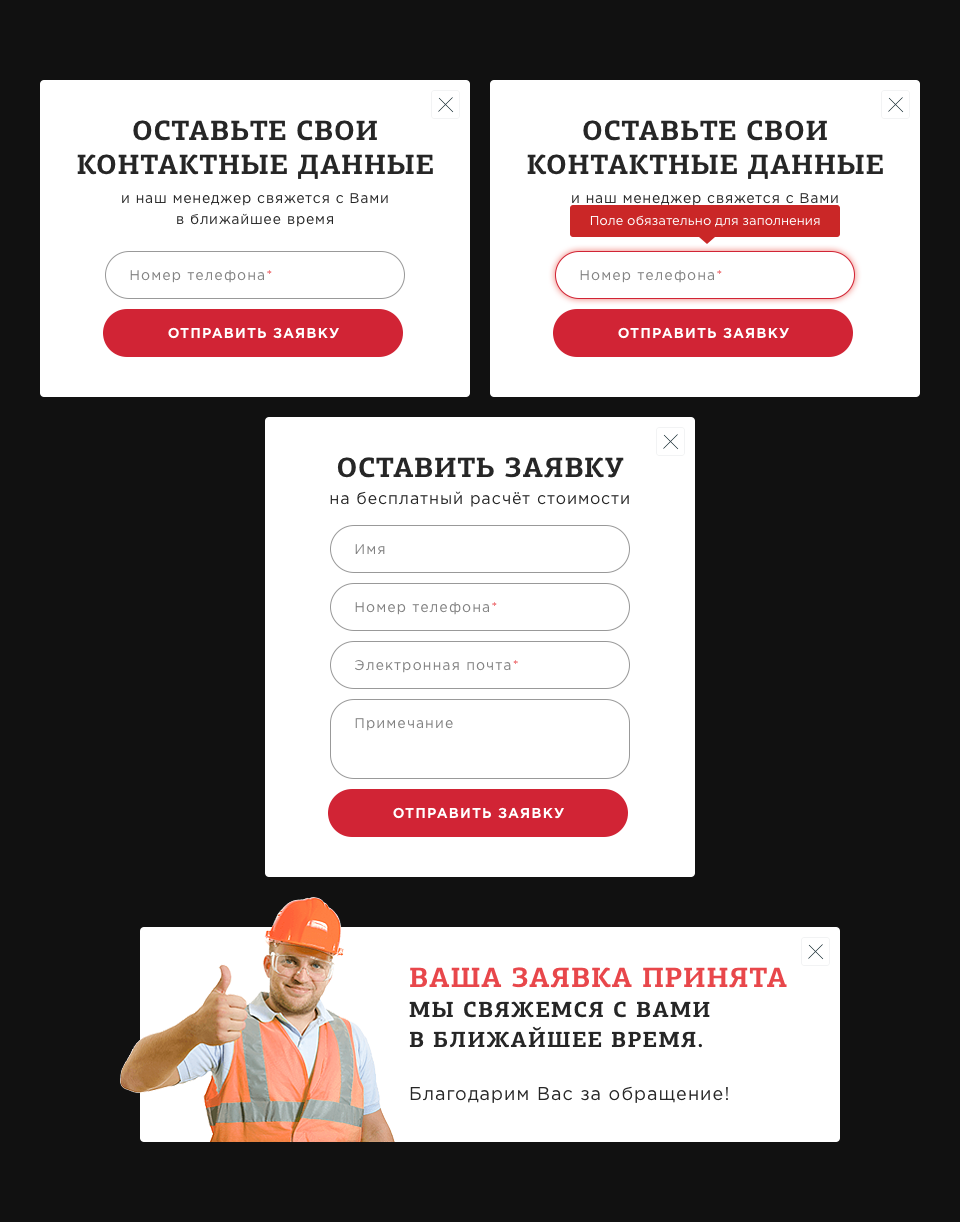
<style>
.page{position:relative;width:960px;height:1222px;background:#111111}
.page>*{position:absolute;margin:0}
.t1{font:28px/34px "PFAgoraSlabPro-Bold";letter-spacing:0.025em;color:#262626;text-transform:uppercase}
.t2{font:14px/21px "GothamPro";letter-spacing:0.06em;color:#262626}
.t3{font:13px "GothamPro";color:#ffffff}
.t4{font:14px "GothamPro";letter-spacing:0.08em;color:#818181}
.t5{font:14px "GothamPro";letter-spacing:0.08em;color:#e8474b}
.t6{font:14px "GothamPro-Bold";letter-spacing:0.08em;color:#ffffff;text-transform:uppercase}
.t7{font:28px "PFAgoraSlabPro-Bold";letter-spacing:0.025em;color:#262626;text-transform:uppercase}
.t8{font:16px "GothamPro";letter-spacing:0.06em;color:#262626}
.t9{font:22px/30px "PFAgoraSlabPro-Bold";letter-spacing:0.06em;color:#262626;text-transform:uppercase}
.t10{font:28px/30px "PFAgoraSlabPro-Bold";letter-spacing:0.025em;color:#e8474b;text-transform:uppercase}
.t11{font:18px "GothamPro";letter-spacing:0.06em;color:#262626}
</style>
<div class="page">
<p class="t1" style="left:77px;top:120px;width:356px;height:59px;text-align:center">Оставьте свои<br>контактные данные</p>
<p class="t1" style="left:527px;top:120px;width:356px;height:59px;text-align:center">Оставьте свои<br>контактные данные</p>
<p class="t2" style="left:122px;top:193px;width:266px;height:34px;text-align:center">и наш менеджер свяжется с Вами<br>в ближайшее время</p>
<p class="t2" style="left:572px;top:193px;width:266px;height:34px;text-align:center">и наш менеджер свяжется с Вами<br>в ближайшее время</p>
<p class="t3" style="left:590px;top:215px;width:230px;height:12px">Поле обязательно для заполнения</p>
<p class="t4" style="left:130px;top:270px;width:142px;height:13px">Номер телефона<span class="t5">*</span></p>
<p class="t4" style="left:580px;top:270px;width:142px;height:13px">Номер телефона<span class="t5">*</span></p>
<p class="t6" style="left:168px;top:327px;width:171px;height:12px">Отправить заявку</p>
<p class="t6" style="left:618px;top:327px;width:171px;height:12px">Отправить заявку</p>
<p class="t7" style="left:337px;top:457px;width:287px;height:21px">Оставить заявку</p>
<p class="t8" style="left:330px;top:491px;width:299px;height:16px">на бесплатный расчёт стоимости</p>
<p class="t4" style="left:355px;top:544px;width:30px;height:10px">Имя</p>
<p class="t4" style="left:355px;top:602px;width:142px;height:13px">Номер телефона<span class="t5">*</span></p>
<p class="t4" style="left:355px;top:660px;width:163px;height:13px">Электронная почта<span class="t5">*</span></p>
<p class="t4" style="left:355px;top:718px;width:98px;height:13px">Примечание</p>
<p class="t6" style="left:393px;top:807px;width:171px;height:12px">Отправить заявку</p>
<p class="t9" style="left:409px;top:967px;width:378px;height:81px"><span class="t10">Ваша заявка принята<br></span>мы свяжемся с Вами<br>в ближайшее время.</p>
<p class="t11" style="left:410px;top:1086px;width:318px;height:17px">Благодарим Вас за обращение!</p>
</div>
